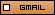
<style>
.page{position:relative;width:55px;height:15px;background:#000000}
.page>*{position:absolute;margin:0}
.t1{font:8px "BitDustTwo";color:#000000}
</style>
<div class="page">
<p class="t1" style="left:20px;top:5px;width:25px;height:5px">GMAIL</p>
</div>
